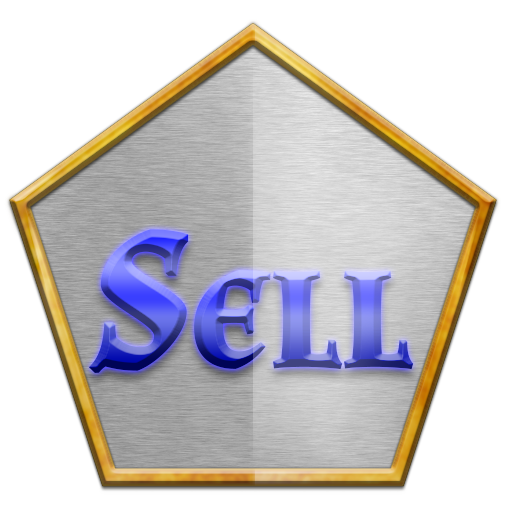
<style>
.page{position:relative;width:512px;height:512px;background:#ffffff}
.page>*{position:absolute;margin:0}
.t1{font:200px "Almendra-Bold";font-variant:small-caps;font-weight:bold}
</style>
<div class="page">
<p class="t1" style="left:88px;top:229px;width:326px;height:144px">Sell</p>
</div>
